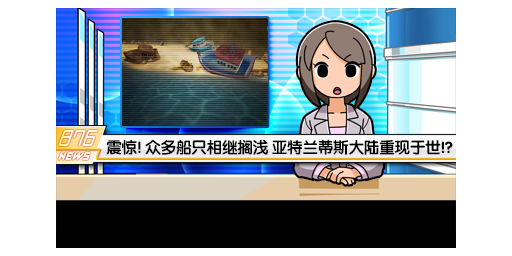
<style>
.page{position:relative;width:512px;height:256px;background:#ffffff}
.page>*{position:absolute;margin:0}
.t1{font:16px "FZY4K--GBK1-0";letter-spacing:-0.04em;color:#000000}
</style>
<div class="page">
<p class="t1" style="left:106px;top:139px;width:347px;height:16px">震惊! 众多船只相继搁浅 亚特兰蒂斯大陆重现于世!?</p>
</div>
